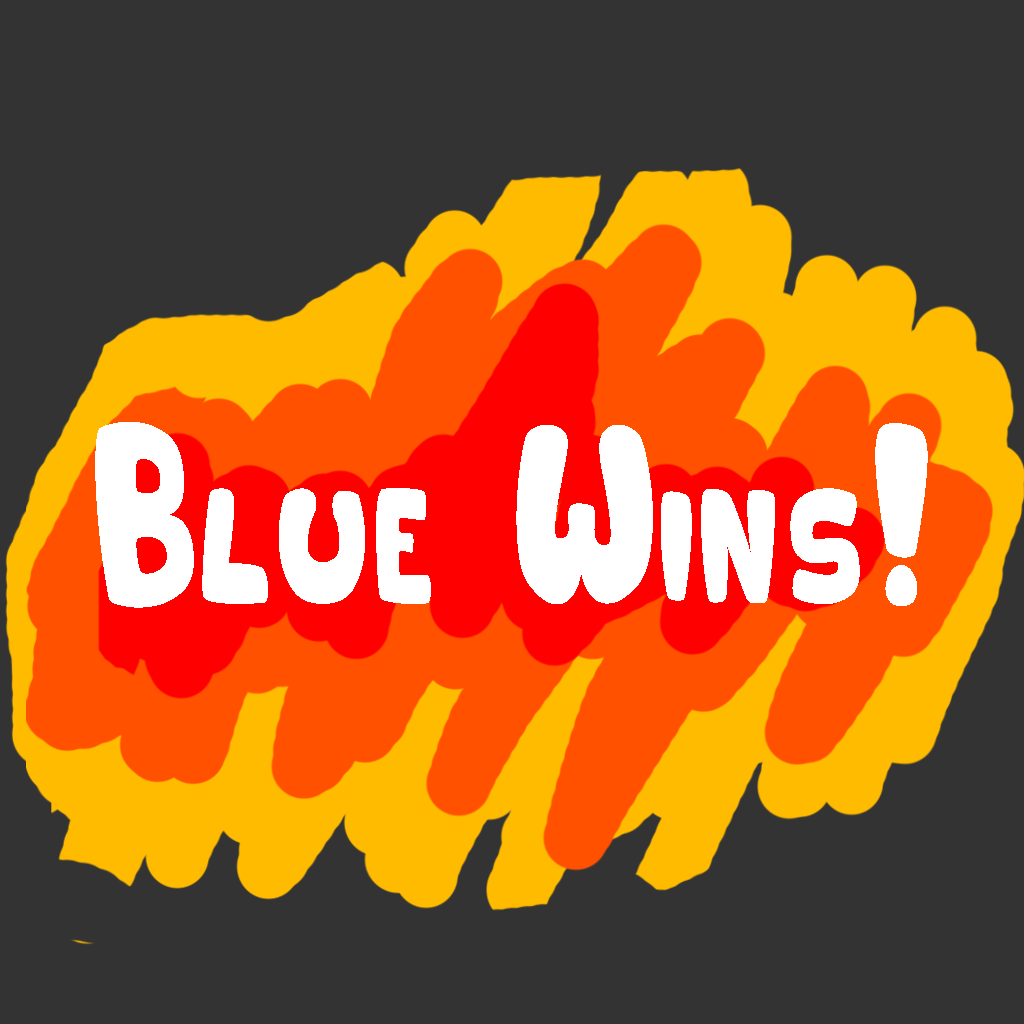
<style>
.page{position:relative;width:1024px;height:1024px;background:#333333}
.page>*{position:absolute;margin:0}
.t1{font:202.2px "Hurly-Burly";color:#ffffff;scale:0.76 1}
</style>
<div class="page">
<p class="t1" style="left:95px;top:422px;width:833px;height:186px">Blue Wins!</p>
</div>
